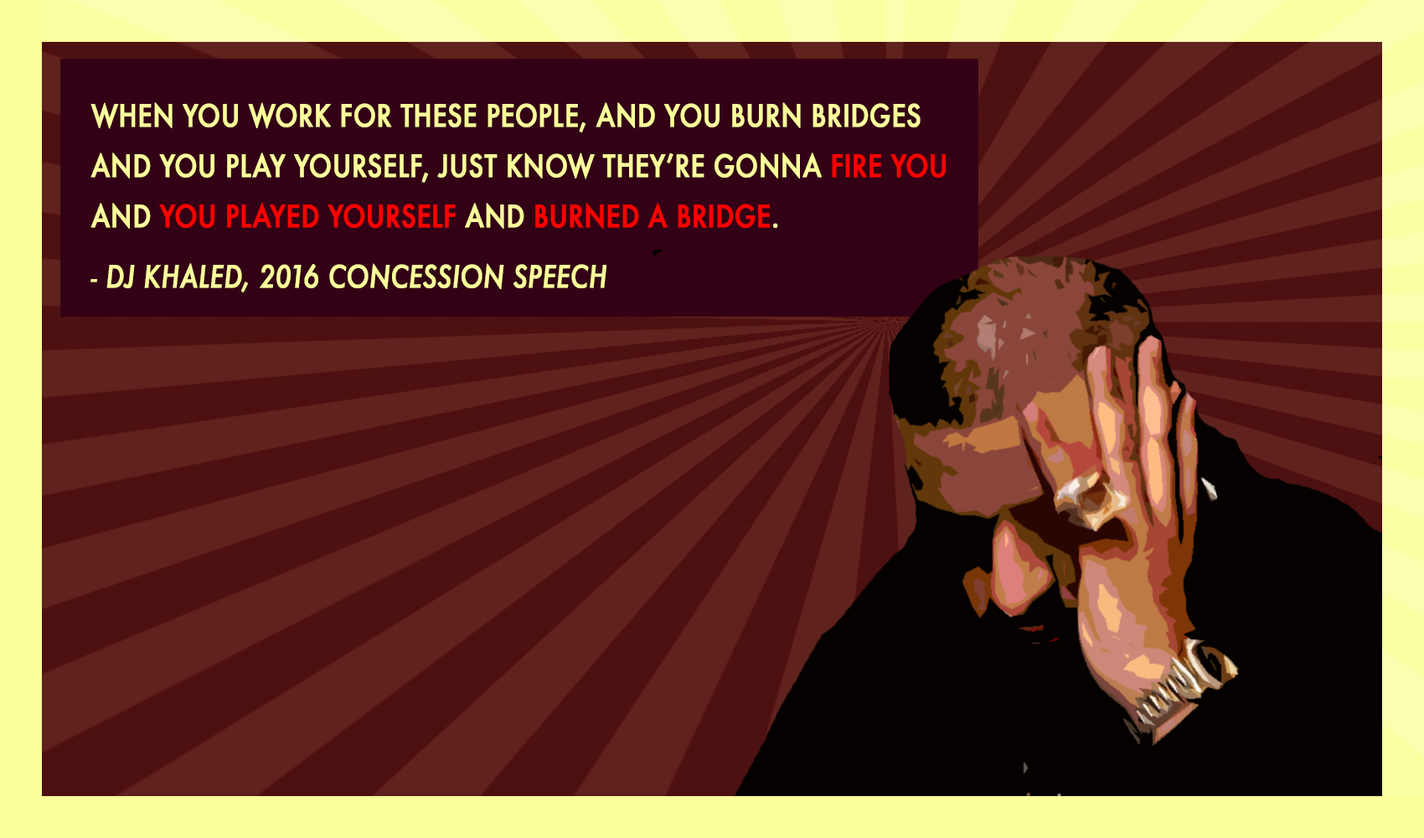
<style>
.page{position:relative;width:1424px;height:838px}
.page>*{position:absolute;margin:0}
.t1{font:29.9px/50.3px "Futura-Medium";color:#f9ff9b;font-weight:bold;scale:0.84 1}
.t2{font:29.9px/50.3px "Futura-Medium";color:#ff0000;font-weight:bold;scale:0.84 1}
.t3{font:29.9px/60.3px "Futura-MediumItalic";color:#f9ff9b;font-weight:bold;scale:0.84 1}
</style>
<div class="page">
<p class="t1" style="left:90px;top:102px;width:856px;height:190px">WHEN YOU WORK FOR THESE PEOPLE, AND YOU BURN BRIDGES AND YOU PLAY YOURSELF, JUST KNOW THEY’RE GONNA<span class="t2"> FIRE YOU</span> AND <span class="t2">YOU PLAYED YOURSELF</span> AND<span class="t2"> BURNED A BRIDGE</span>.<br><span class="t3">- DJ KHALED, 2016 CONCESSION SPEECH</span></p>
</div>
